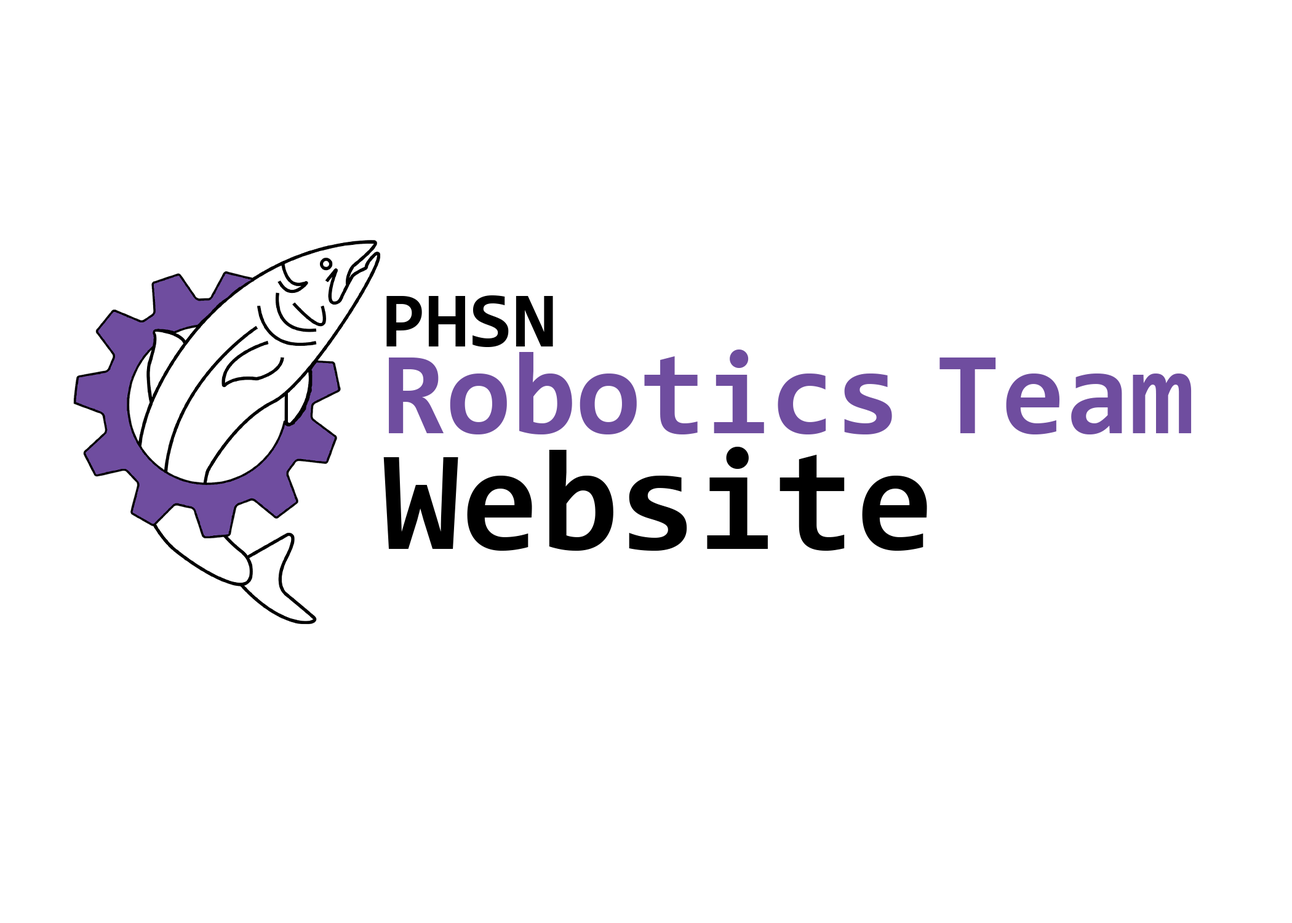
<style>
.page{position:relative;width:1292px;height:923px;background:#ffffff}
.page>*{position:absolute;margin:0}
.t1{font:117.9px/87.2px "Consolas-Bold";color:#6f4d9f}
.t2{font:79.5px/92.3px "Consolas-Bold";color:#000000}
.t3{font:143.6px/115.4px "Consolas-Bold";color:#000000}
</style>
<div class="page">
<p class="t1" style="left:383px;top:295px;width:809px;height:256px"><span class="t2">PHSN<br></span>Robotics Team<br><span class="t3">Website</span></p>
</div>
